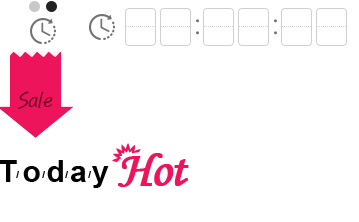
<style>
.page{position:relative;width:359px;height:222px;background:#ffffff}
.page>*{position:absolute;margin:0}
.t1{font:30px "Arial-BoldMT";letter-spacing:-0.05em;color:#000000}
.t2{font:50px "MonotypeCorsiva";letter-spacing:-0.05em;color:#ed145b;font-weight:bold}
.t3{font:10px "Arial-BoldMT";letter-spacing:-0.05em;color:#000000}
</style>
<div class="page">
<p class="t1" style="left:0px;top:160px;width:109px;height:28px">T o d a y</p>
<p class="t2" style="left:118px;top:153px;width:71px;height:34px">Hot</p>
<p class="t3" style="left:16px;top:171px;width:3px;height:7px">/</p>
<p class="t3" style="left:42px;top:171px;width:3px;height:7px">/</p>
<p class="t3" style="left:65px;top:171px;width:3px;height:7px">/</p>
<p class="t3" style="left:88px;top:171px;width:3px;height:7px">/</p>
</div>
